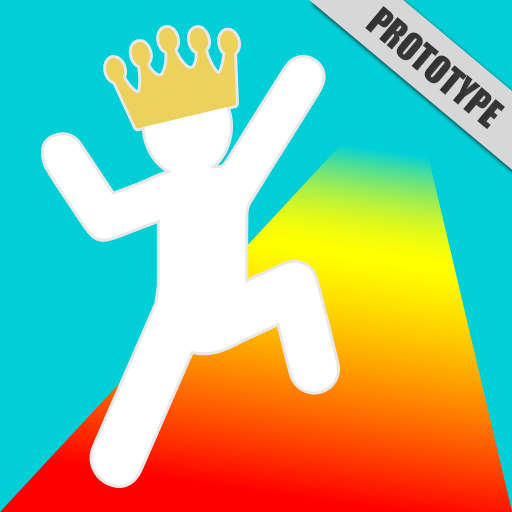
<style>
.page{position:relative;width:512px;height:512px;background:#00cfd8}
.page>*{position:absolute;margin:0}
.t1{font:36.1px "Impact";color:#3a3a3a;text-transform:uppercase}
</style>
<div class="page">
<p class="t1" style="left:365px;top:6px;width:140px;height:124px;rotate:40deg">Prototype</p>
</div>
